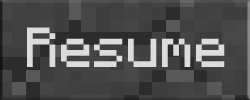
<style>
.page{position:relative;width:250px;height:100px}
.page>*{position:absolute;margin:0}
.t1{font:45px "Minecraftia";color:#dcdcdc}
</style>
<div class="page">
<p class="t1" style="left:27px;top:27px;width:198px;height:40px">Resume</p>
</div>
